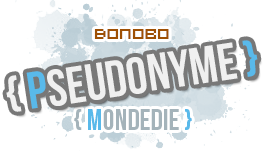
<style>
.page{position:relative;width:264px;height:151px;background:#ffffff}
.page>*{position:absolute;margin:0}
.t1{font:27px "VisitorTT2BRK";color:#9e5004}
.t2{font:52px "BebasNeue";color:#f0f0f0}
.t3{font:52px "BebasNeue";color:#f1f1f1}
.t4{font:52px "BebasNeue";color:#59b9ea}
.t5{font:30px "BebasNeue";color:#a4b3ba}
.t6{font:30px "BebasNeue";color:#59b9ea}
</style>
<div class="page">
<p class="t1" style="left:94px;top:29px;width:75px;height:10px">Bonobo</p>
<p class="t2" style="left:6px;top:40px;width:252px;height:72px;rotate:-9deg"><span class="t3">{ </span><span class="t4">P</span>SEUDONYME <span class="t4">}</span></p>
<p class="t5" style="left:74px;top:109px;width:118px;height:21px">{<span class="t6"> M</span>ONDEDIE<span class="t6"> }</span></p>
</div>
